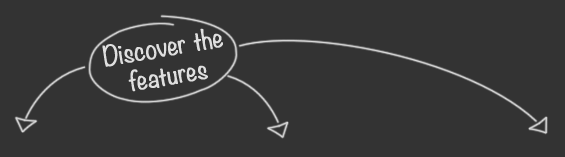
<style>
.page{position:relative;width:565px;height:157px;background:#333333}
.page>*{position:absolute;margin:0}
.t1{font:24px "Noteworthy-Light";color:#dfdfdf;font-weight:bold}
</style>
<div class="page">
<p class="t1" style="left:102px;top:28px;width:121px;height:64px;text-align:center;rotate:-10deg">Discover the<br>features</p>
</div>
